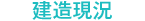
<style>
.page{position:relative;width:145px;height:21px;background:#ffffff}
.page>*{position:absolute;margin:0}
.t1{font:20px "GothicMB101Pro-Medium";color:#1dbcc0}
</style>
<div class="page">
<p class="t1" style="left:32px;top:1px;width:80px;height:19px">建造現況</p>
</div>
